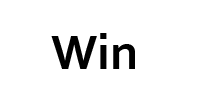
<style>
.page{position:relative;width:197px;height:100px;background:#ffffff}
.page>*{position:absolute;margin:0}
.t1{font:50.8px "Corbel-Bold";color:#000000}
</style>
<div class="page">
<p class="t1" style="left:51px;top:33px;width:84px;height:36px">Win</p>
</div>
